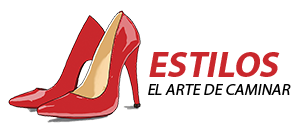
<style>
.page{position:relative;width:300px;height:133px;background:#ffffff}
.page>*{position:absolute;margin:0}
.t1{font:36px "MyriadPro-Bold";color:#c9272c;font-style:italic}
.t2{font:16px "MyriadPro-Regular";color:#000000;font-style:italic}
</style>
<div class="page">
<p class="t1" style="left:149px;top:52px;width:131px;height:25px">ESTILOS</p>
<p class="t2" style="left:148px;top:84px;width:143px;height:11px">EL ARTE DE CAMINAR</p>
</div>
